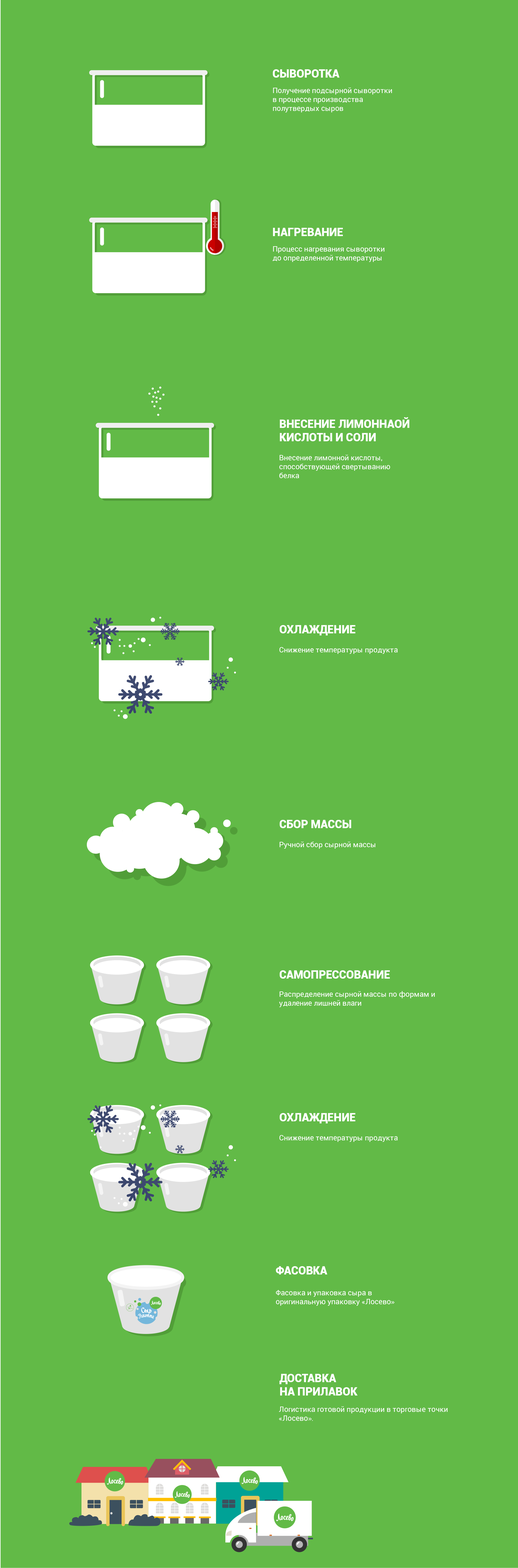
<style>
.page{position:relative;width:518px;height:1568px;background:#62ba47}
.page>*{position:absolute;margin:0}
.t1{font:11.2px "Roboto-Black";color:#ffffff}
.t2{font:7.4px "Roboto-Regular";color:#ffffff}
</style>
<div class="page">
<p class="t1" style="left:273px;top:69px;width:67px;height:9px">СЫВОРОТКА</p>
<p class="t2" style="left:273px;top:87px;width:119px;height:25px">Получение подсырной сыворотки в процессе производства полутвердых сыров</p>
<p class="t1" style="left:273px;top:228px;width:70px;height:8px">НАГРЕВАНИЕ</p>
<p class="t2" style="left:273px;top:246px;width:111px;height:16px">Процесс нагревания сыворотки до определенной температуры</p>
<p class="t1" style="left:280px;top:417px;width:129px;height:24px">ВНЕСЕНИЕ ЛИМОННАОЙ КИСЛОТЫ И СОЛИ</p>
<p class="t2" style="left:279px;top:455px;width:111px;height:23px">Внесение лимонной кислоты, способствующей свертыванию белка</p>
<p class="t1" style="left:280px;top:625px;width:75px;height:10px">ОХЛАЖДЕНИЕ</p>
<p class="t2" style="left:279px;top:647px;width:119px;height:7px">Снижение температуры продукта</p>
<p class="t1" style="left:280px;top:820px;width:71px;height:8px">СБОР МАССЫ</p>
<p class="t2" style="left:280px;top:842px;width:95px;height:7px">Ручной сбор сырной массы</p>
<p class="t1" style="left:280px;top:970px;width:110px;height:9px">САМОПРЕССОВАНИЕ</p>
<p class="t2" style="left:279px;top:991px;width:156px;height:16px">Распределение сырной массы по формам и удаление лишней влаги</p>
<p class="t1" style="left:280px;top:1113px;width:75px;height:10px">ОХЛАЖДЕНИЕ</p>
<p class="t2" style="left:279px;top:1135px;width:119px;height:7px">Снижение температуры продукта</p>
<p class="t1" style="left:276px;top:1266px;width:51px;height:9px">ФАСОВКА</p>
<p class="t2" style="left:276px;top:1290px;width:118px;height:16px">Фасовка и упаковка сыра в оригинальную упаковку «Лосево»</p>
<p class="t1" style="left:279px;top:1374px;width:79px;height:22px">ДОСТАВКА <br>НА ПРИЛАВОК</p>
<p class="t2" style="left:279px;top:1406px;width:169px;height:15px">Логистика готовой продукции в торговые точки «Лосево».</p>
</div>
